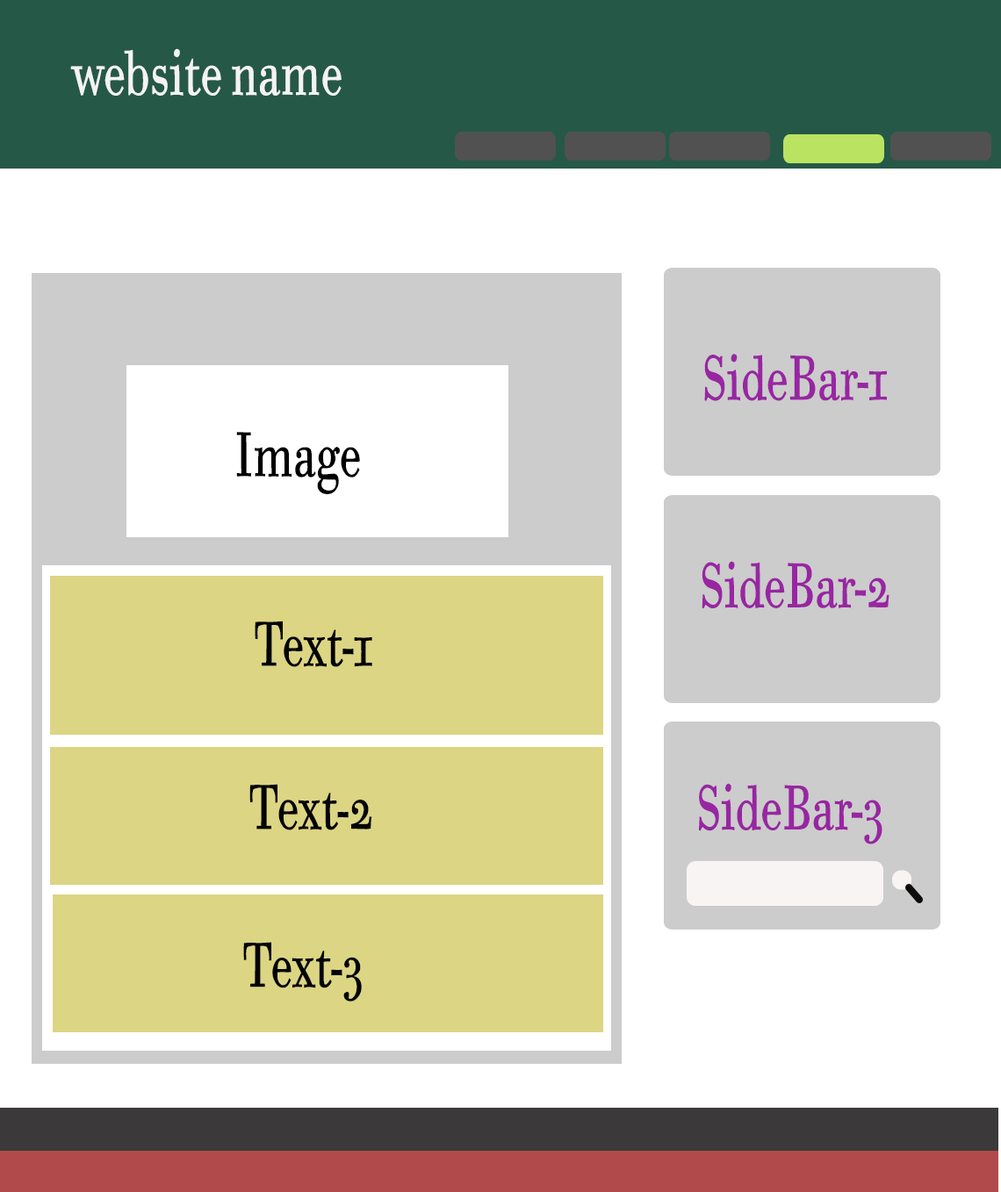
<style>
.page{position:relative;width:1001px;height:1192px;background:#ffffff}
.page>*{position:absolute;margin:0}
.t1{font:63.2px "BodoniSixOSITCTTBook";color:#f3f3f3;scale:0.67 1}
.t2{font:63.2px "BodoniSixOSITCTTBook";color:#9826a2;scale:0.67 1}
.t3{font:63.2px "BodoniSixOSITCTTBook";color:#000000;scale:0.67 1}
.t4{font:63.2px "BodoniSixOSITCTTBook";color:#030303;scale:0.67 1}
</style>
<div class="page">
<p class="t1" style="left:70px;top:48px;width:271px;height:48px">website name</p>
<p class="t2" style="left:704px;top:354px;width:182px;height:47px">SideBar-1</p>
<p class="t3" style="left:236px;top:432px;width:124px;height:62px">Image</p>
<p class="t2" style="left:701px;top:561px;width:188px;height:47px">SideBar-2</p>
<p class="t4" style="left:255px;top:620px;width:117px;height:47px">Text-1</p>
<p class="t4" style="left:249px;top:784px;width:123px;height:46px">Text-2</p>
<p class="t2" style="left:699px;top:783px;width:183px;height:61px">SideBar-3</p>
<p class="t4" style="left:243px;top:942px;width:119px;height:59px">Text-3</p>
</div>
